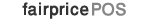
<style>
.page{position:relative;width:148px;height:19px;background:#ffffff}
.page>*{position:absolute;margin:0}
.t1{font:24px "WinSoftPro-Medium";color:#333333}
.t2{font:24px "WinSoftPro-Medium";color:#878585}
</style>
<div class="page">
<p class="t1" style="left:22px;top:2px;width:67px;height:17px">fairprice</p>
<p class="t2" style="left:92px;top:2px;width:34px;height:14px">POS</p>
</div>
